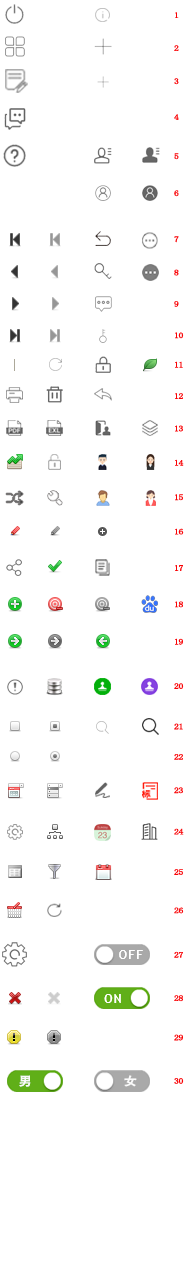
<style>
.page{position:relative;width:189px;height:1271px;background:#ffffff}
.page>*{position:absolute;margin:0}
.t1{font:8px/34.4px "NSimSun";letter-spacing:-0.057em;color:#f90205;font-weight:bold;scale:1.2 1}
.t2{font:8px/33px "NSimSun";letter-spacing:-0.057em;color:#f90205;font-weight:bold;scale:1.2 1}
.t3{font:8px/36px "NSimSun";letter-spacing:-0.057em;color:#f90205;font-weight:bold;scale:1.2 1}
.t4{font:8px/39px "NSimSun";letter-spacing:-0.057em;color:#f90205;font-weight:bold;scale:1.2 1}
.t5{font:8px/37px "NSimSun";letter-spacing:-0.057em;color:#f90205;font-weight:bold;scale:1.2 1}
.t6{font:8px/46px "NSimSun";letter-spacing:-0.057em;color:#f90205;font-weight:bold;scale:1.2 1}
.t7{font:8px/33.4px "NSimSun";letter-spacing:-0.057em;color:#f90205;font-weight:bold;scale:1.2 1}
.t8{font:8px/31.4px "NSimSun";letter-spacing:-0.057em;color:#f90205;font-weight:bold;scale:1.2 1}
.t9{font:8px/29.4px "NSimSun";letter-spacing:-0.057em;color:#f90205;font-weight:bold;scale:1.2 1}
.t10{font:8px/32.4px "NSimSun";letter-spacing:-0.057em;color:#f90205;font-weight:bold;scale:1.2 1}
.t11{font:8px/36.4px "NSimSun";letter-spacing:-0.057em;color:#f90205;font-weight:bold;scale:1.2 1}
.t12{font:8px/37.4px "NSimSun";letter-spacing:-0.057em;color:#f90205;font-weight:bold;scale:1.2 1}
.t13{font:8px/44.4px "NSimSun";letter-spacing:-0.057em;color:#f90205;font-weight:bold;scale:1.2 1}
.t14{font:8px/40.4px "NSimSun";letter-spacing:-0.057em;color:#f90205;font-weight:bold;scale:1.2 1}
.t15{font:8px/30.4px "NSimSun";letter-spacing:-0.057em;color:#f90205;font-weight:bold;scale:1.2 1}
.t16{font:8px/41.4px "NSimSun";letter-spacing:-0.057em;color:#f90205;font-weight:bold;scale:1.2 1}
.t17{font:8px/38.4px "NSimSun";letter-spacing:-0.057em;color:#f90205;font-weight:bold;scale:1.2 1}
.t18{font:8px/43.4px "NSimSun";letter-spacing:-0.057em;color:#f90205;font-weight:bold;scale:1.2 1}
.t19{font:8px/39.4px "NSimSun";letter-spacing:-0.057em;color:#f90205;font-weight:bold;scale:1.2 1}
.t20{font:12px "FZHTJW--GB1-0";letter-spacing:-0.057em;color:#fafafa;font-weight:bold;scale:1.05 1}
</style>
<div class="page">
<p class="t1" style="left:174px;top:12px;width:10px;height:1072px"><span class="t2">1<br>2<br></span><span class="t3">3<br></span><span class="t4">4<br></span><span class="t5">5<br></span><span class="t6">6<br></span><span class="t7">7<br></span><span class="t8">8<br>9<br></span><span class="t9">10<br></span><span class="t8">11<br></span><span class="t10">12<br></span>13<br>14<br>15<br><span class="t8">1</span><span class="t11">6<br>17<br></span><span class="t12">18<br></span><span class="t13">19<br></span><span class="t14">20<br></span><span class="t15">21<br></span><span class="t7">22<br></span><span class="t16">23<br></span><span class="t14">24<br></span><span class="t17">25<br></span><span class="t13">26<br></span><span class="t18">27<br></span><span class="t19">28<br></span><span class="t18">29<br>30</span></p>
<p class="t20" style="left:19px;top:1075px;width:12px;height:12px">男</p>
<p class="t20" style="left:124px;top:1075px;width:13px;height:12px">女</p>
</div>
